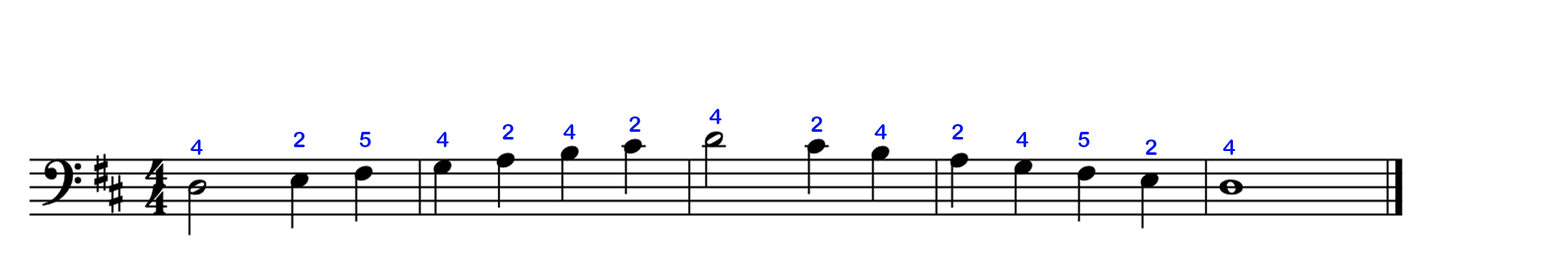
<style>
.page{position:relative;width:1568px;height:279px;background:#ffffff}
.page>*{position:absolute;margin:0}
.t1{font:21.8px "ArialRoundedMTBold";color:#0417ec}
</style>
<div class="page">
<p class="t1" style="left:709px;top:109px;width:13px;height:15px">4</p>
<p class="t1" style="left:502px;top:124px;width:12px;height:16px">2</p>
<p class="t1" style="left:563px;top:124px;width:13px;height:16px">4</p>
<p class="t1" style="left:629px;top:117px;width:12px;height:15px">2</p>
<p class="t1" style="left:811px;top:117px;width:11px;height:15px">2</p>
<p class="t1" style="left:874px;top:124px;width:13px;height:16px">4</p>
<p class="t1" style="left:952px;top:124px;width:11px;height:16px">2</p>
<p class="t1" style="left:293px;top:132px;width:12px;height:15px">2</p>
<p class="t1" style="left:359px;top:132px;width:12px;height:15px">5</p>
<p class="t1" style="left:436px;top:132px;width:13px;height:15px">4</p>
<p class="t1" style="left:1016px;top:132px;width:13px;height:15px">4</p>
<p class="t1" style="left:1078px;top:132px;width:12px;height:15px">5</p>
<p class="t1" style="left:190px;top:140px;width:13px;height:15px">4</p>
<p class="t1" style="left:1145px;top:140px;width:12px;height:15px">2</p>
<p class="t1" style="left:1223px;top:140px;width:13px;height:15px">4</p>
</div>
